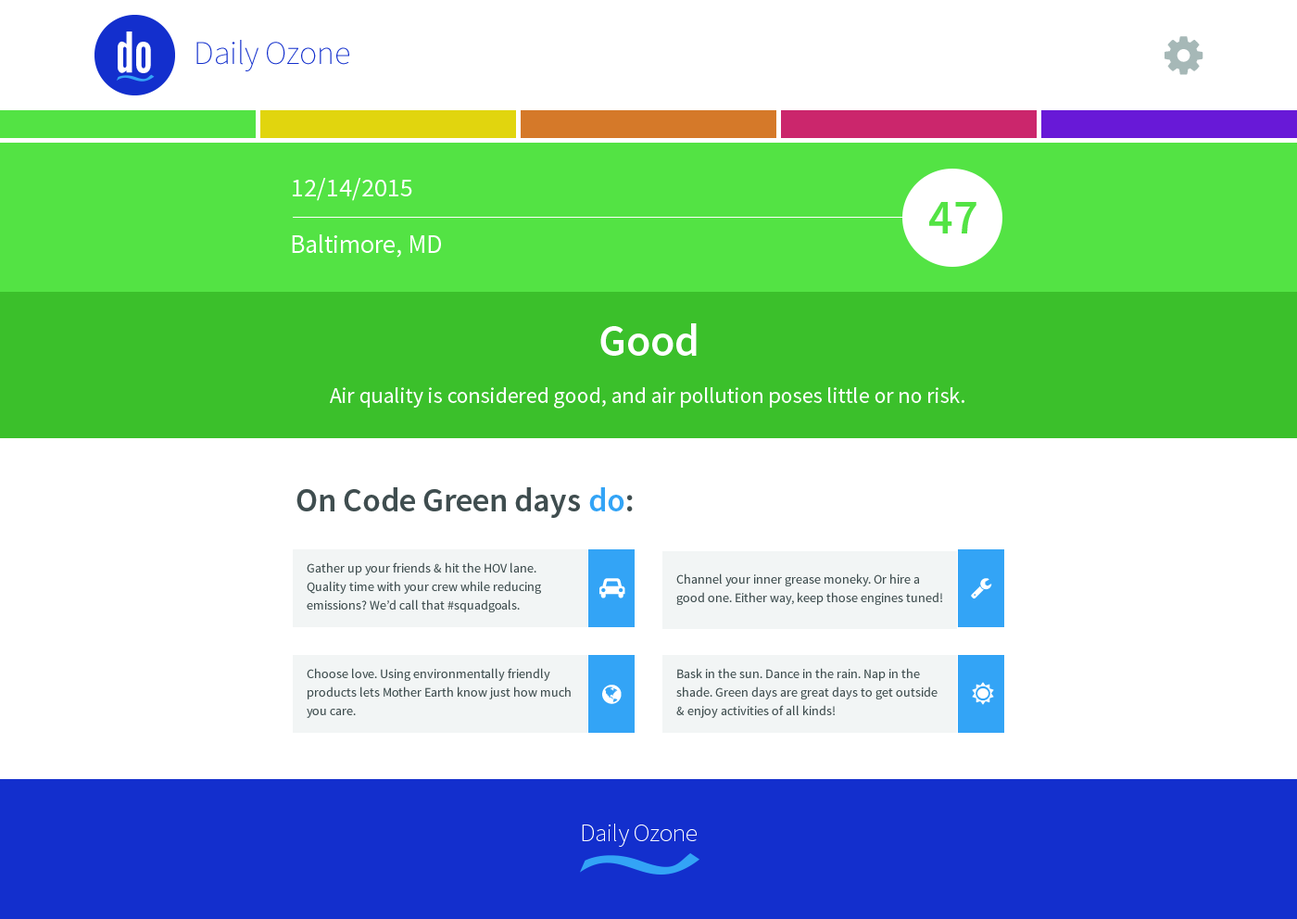
<style>
.page{position:relative;width:1297px;height:919px;background:#ffffff}
.page>*{position:absolute;margin:0}
.t1{font:33.4px "SourceSansPro-ExtraLight";color:#132fcd}
.t2{font:25.9px "SourceSansPro-Regular";color:#ffffff}
.t3{font:48.2px "SourceSansPro-Semibold";color:#53e344}
.t4{font:44.5px "SourceSansPro-Semibold";color:#ffffff}
.t5{font:22.2px "SourceSansPro-Regular";color:#ffffff}
.t6{font:33.4px "SourceSansPro-Semibold";color:#404e4f}
.t7{font:33.4px "SourceSansPro-Semibold";color:#33a4f6}
.t8{font:13px/18.5px "SourceSansPro-Regular";color:#404e4f}
</style>
<div class="page">
<p class="t1" style="left:196px;top:40px;width:153px;height:31px">Daily Ozone</p>
<p class="t2" style="left:293px;top:178px;width:119px;height:23px">12/14/2015</p>
<p class="t3" style="left:929px;top:202px;width:48px;height:32px">47</p>
<p class="t2" style="left:292px;top:234px;width:149px;height:24px">Baltimore, MD</p>
<p class="t4" style="left:600px;top:323px;width:97px;height:33px">Good</p>
<p class="t5" style="left:330px;top:387px;width:635px;height:22px">Air quality is considered good, and air pollution poses little or no risk.</p>
<p class="t6" style="left:297px;top:487px;width:336px;height:31px">On Code Green days <span class="t7">do</span>:</p>
<p class="t8" style="left:307px;top:562px;width:234px;height:50px">Gather up your friends &amp; hit the HOV lane. Quality time with your crew while reducing emissions? We’d call that #squadgoals.</p>
<p class="t8" style="left:676px;top:574px;width:266px;height:31px">Channel your inner grease moneky. Or hire a good one. Either way, keep those engines tuned!</p>
<p class="t8" style="left:307px;top:668px;width:264px;height:50px">Choose love. Using environmentally friendly products lets Mother Earth know just how much you care.</p>
<p class="t8" style="left:676px;top:668px;width:262px;height:50px">Bask in the sun. Dance in the rain. Nap in the shade. Green days are great days to get outside &amp; enjoy activities of all kinds!</p>
</div>
